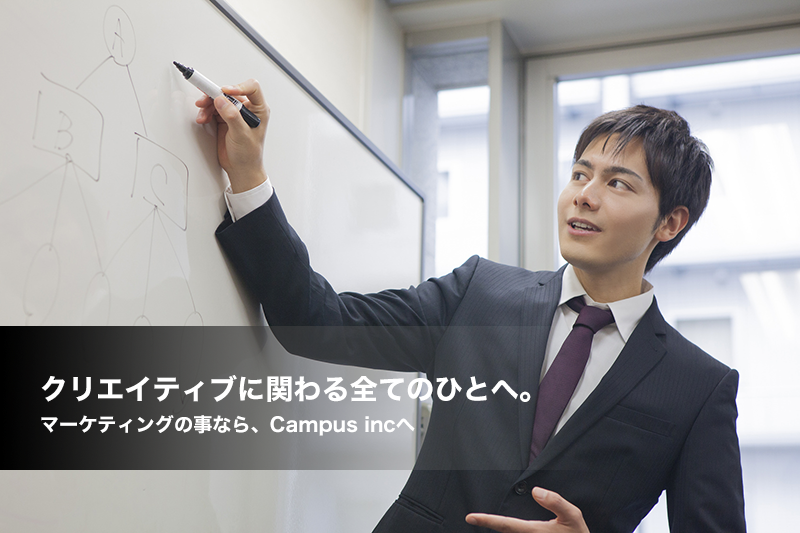
<style>
.page{position:relative;width:800px;height:533px}
.page>*{position:absolute;margin:0}
.t1{font:28.2px "HiraKakuStdN-W7";color:#ffffff}
.t2{font:19.2px "HiraKakuStdN-W7";color:#ffffff}
</style>
<div class="page">
<p class="t1" style="left:41px;top:375px;width:490px;height:27px">クリエイティブに関わる全てのひとへ。</p>
<p class="t2" style="left:41px;top:415px;width:374px;height:21px">マーケティングの事なら、Campus incへ</p>
</div>
